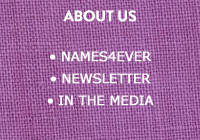
<style>
.page{position:relative;width:200px;height:140px}
.page>*{position:absolute;margin:0}
.t1{font:15px "BrandonGrotesque-Bold";letter-spacing:-0.02em;color:#ffffff;font-weight:bold}
.t2{font:13px/22px "Verdana";letter-spacing:-0.02em;color:#ffffff;font-weight:bold}
</style>
<div class="page">
<p class="t1" style="left:63px;top:10px;width:74px;height:12px">ABOUT US</p>
<p class="t2" style="left:47px;top:51px;width:107px;height:55px;text-align:center">• NAMES4EVER<br>• NEWSLETTER<br>• IN THE MEDIA</p>
</div>
